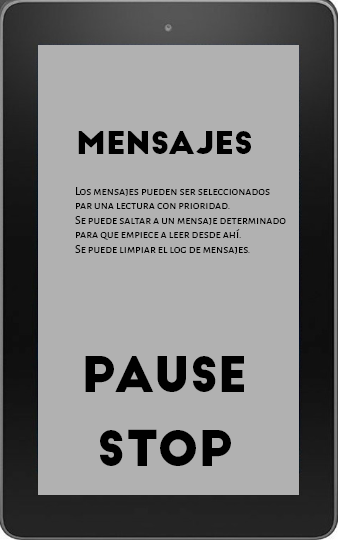
<style>
.page{position:relative;width:338px;height:540px;background:#b1b1b1}
.page>*{position:absolute;margin:0}
.t1{font:30.8px "BigJohn";color:#000000;scale:1.04 1}
.t2{font:12px "AlegreyaSansSC-Regular";color:#000000}
.t3{font:48px "BigJohn";color:#000000}
</style>
<div class="page">
<p class="t1" style="left:78px;top:131px;width:173px;height:24px">Mensajes</p>
<p class="t2" style="left:75px;top:187px;width:211px;height:67px;text-align:right">Los mensajes pueden ser seleccionados<br>par una lectura con prioridad.<br>Se puede saltar a un mensaje determinado<br>para que empiece a leer desde ahí.<br>Se puede limpiar el log de mensajes.</p>
<p class="t3" style="left:85px;top:356px;width:159px;height:36px">Pause</p>
<p class="t3" style="left:100px;top:429px;width:131px;height:37px">Stop</p>
</div>
